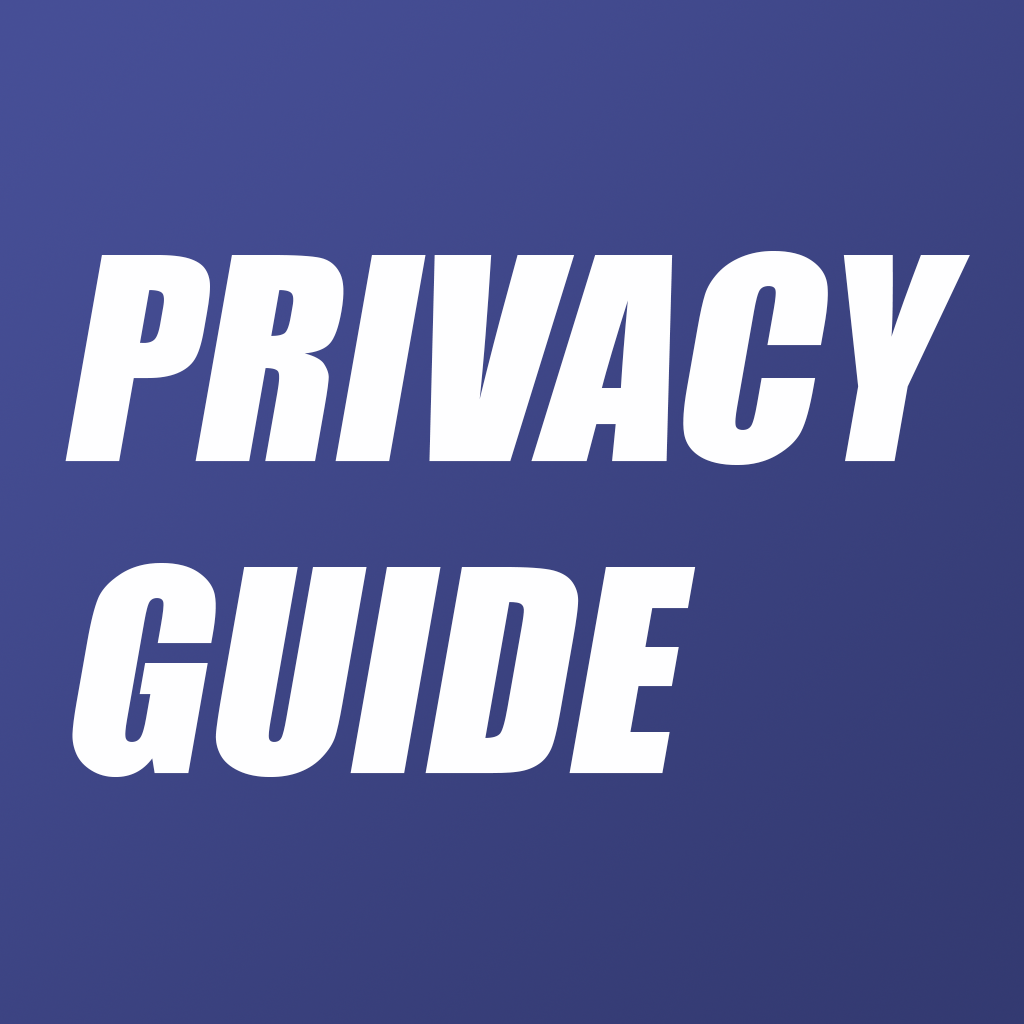
<style>
.page{position:relative;width:1024px;height:1024px;background:#fefeff}
.page>*{position:absolute;margin:0}
.t1{font:260px "Impact";color:#fefeff;text-transform:uppercase;font-style:italic}
</style>
<div class="page">
<p class="t1" style="left:65px;top:251px;width:905px;height:526px">Privacy<br>Guide</p>
</div>
